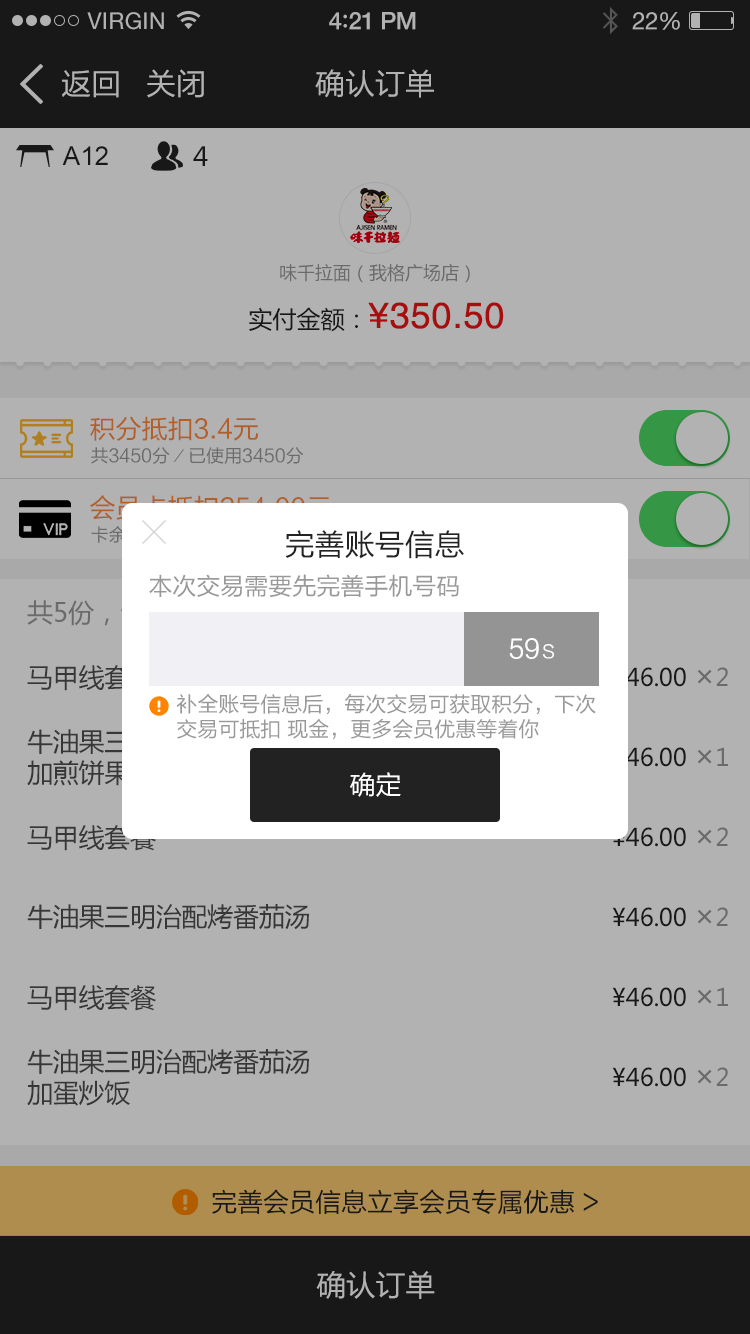
<style>
.page{position:relative;width:750px;height:1334px;background:#b2b2b2}
.page>*{position:absolute;margin:0}
.t1{font:23px "HelveticaNeue";letter-spacing:0.02em;color:#b2b2b2}
.t2{font:24px "HelveticaNeue-Medium";letter-spacing:-0.02em;color:#b2b2b2}
.t3{font:26px "Avenir-Medium";letter-spacing:-0.02em;color:#b2b2b2}
.t4{font:24px "HelveticaNeue";letter-spacing:-0.02em;color:#b2b2b2}
.t5{font:30px "FZLTHK--GBK1-0";color:#b2b2b2}
.t6{font:26px "ArialMT";color:#222222}
.t7{font:26px "MicrosoftYaHei";color:#222222}
.t8{font:18px "MicrosoftYaHei";color:#6b6b6b}
.t9{font:36px "Helvetica";color:#a70f0f;font-weight:bold}
.t10{font:24px "MicrosoftYaHei";color:#a70f0f}
.t11{font:26px "FZLTHK--GBK1-0";color:#b25f2a}
.t12{font:18px "FZLTHK--GBK1-0";color:#6b6b6b}
.t13{font:30px "FZLTHK--GBK1-0";color:#222222}
.t14{font:24px "FZLTHK--GBK1-0";color:#999999}
.t15{font:26px "FZLTHK--GBK1-0";color:#ffffff}
.t16{font:18px "FZLTHK--GBK1-0";color:#ffffff}
.t17{font:26px "MicrosoftYaHei";letter-spacing:-0.01em;color:#4f4f4f}
.t18{font:24px "MicrosoftYaHei";letter-spacing:-0.01em}
.t19{font:30px "MicrosoftYaHei";letter-spacing:-0.01em}
.t20{font:21px "FZLTHK--GBK1-0";color:#999999}
.t21{font:24px "MicrosoftYaHei";letter-spacing:-0.01em;color:#222222}
.t22{font:30px "MicrosoftYaHei";letter-spacing:-0.01em;color:#999999}
.t23{font:24px "MicrosoftYaHei";letter-spacing:-0.01em;color:#999999}
.t24{font:26px "FZLTHK--GBK1-0";color:#222222}
.t25{font:30px "FZLTHK--GBK1-0";letter-spacing:-0.01em;color:#b2b2b2}
</style>
<div class="page">
<p class="t1" style="left:87px;top:12px;width:77px;height:18px">VIRGIN</p>
<p class="t2" style="left:329px;top:12px;width:87px;height:18px">4<span class="t3">:</span>21 PM</p>
<p class="t4" style="left:632px;top:12px;width:48px;height:18px">22%</p>
<p class="t5" style="left:62px;top:70px;width:57px;height:28px">返回</p>
<p class="t5" style="left:147px;top:69px;width:57px;height:29px">关闭</p>
<p class="t5" style="left:315px;top:69px;width:119px;height:29px">确认订单</p>
<p class="t6" style="left:62px;top:146px;width:46px;height:19px">A12</p>
<p class="t7" style="left:193px;top:146px;width:15px;height:20px">4</p>
<p class="t8" style="left:280px;top:263px;width:190px;height:20px">味千拉面（我格广场店）</p>
<p class="t9" style="left:249px;top:302px;width:255px;height:30px"><span class="t10">实付金额：</span>¥350.50</p>
<p class="t11" style="left:90px;top:416px;width:168px;height:25px">积分抵扣3.4元</p>
<p class="t12" style="left:91px;top:447px;width:213px;height:17px">共3450分／已使用3450分</p>
<p class="t13" style="left:285px;top:530px;width:179px;height:29px">完善账号信息</p>
<p class="t14" style="left:149px;top:574px;width:310px;height:23px">本次交易需要先完善手机号码</p>
<p class="t15" style="left:509px;top:638px;width:45px;height:21px">59 <span class="t16">S</span></p>
<p class="t17" style="left:27px;top:665px;width:129px;height:26px">马甲线套餐</p>
<p class="t18" style="left:612px;top:667px;width:116px;height:20px">¥46.00 <span class="t19">×</span>2</p>
<p class="t20" style="left:176px;top:694px;width:420px;height:46px">补全账号信息后，每次交易可获取积分，下次<br>交易可抵扣 现金，更多会员优惠等着你</p>
<p class="t18" style="left:612px;top:747px;width:116px;height:20px">¥46.00 <span class="t19">×</span>1</p>
<p class="t15" style="left:350px;top:772px;width:51px;height:25px">确定</p>
<p class="t17" style="left:27px;top:825px;width:129px;height:26px">马甲线套餐</p>
<p class="t21" style="left:612px;top:827px;width:116px;height:20px">¥46.00 <span class="t22">×</span><span class="t23">2</span></p>
<p class="t17" style="left:27px;top:904px;width:282px;height:26px">牛油果三明治配烤番茄汤</p>
<p class="t21" style="left:612px;top:907px;width:116px;height:20px">¥46.00 <span class="t22">×</span><span class="t23">2</span></p>
<p class="t17" style="left:27px;top:985px;width:129px;height:26px">马甲线套餐</p>
<p class="t21" style="left:612px;top:987px;width:116px;height:20px">¥46.00 <span class="t22">×</span><span class="t23">1</span></p>
<p class="t17" style="left:27px;top:1049px;width:282px;height:57px">牛油果三明治配烤番茄汤<br>加蛋炒饭</p>
<p class="t21" style="left:612px;top:1067px;width:116px;height:20px">¥46.00 <span class="t22">×</span><span class="t23">2</span></p>
<p class="t24" style="left:212px;top:1189px;width:386px;height:25px">完善会员信息立享会员专属优惠 &gt;</p>
<p class="t25" style="left:316px;top:1271px;width:119px;height:28px">确认订单</p>
</div>
